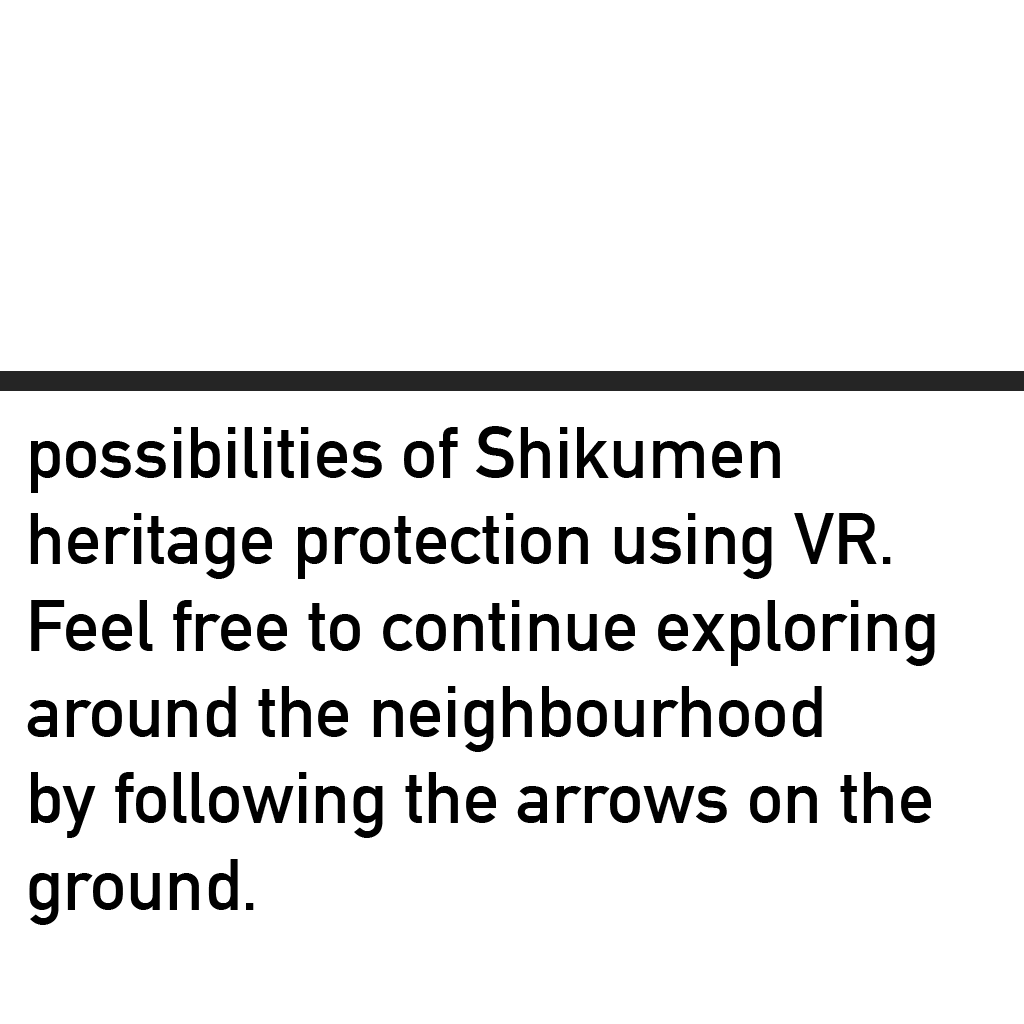
<style>
.page{position:relative;width:1024px;height:1024px;background:#ffffff}
.page>*{position:absolute;margin:0}
.t1{font:72px "DINAlternate-Bold";color:#000000}
</style>
<div class="page">
<p class="t1" style="left:27px;top:426px;width:908px;height:499px">possibilities of Shikumen<br>heritage protection using VR. <br>Feel free to continue exploring<br>around the neighbourhood<br>by following the arrows on the <br>ground.</p>
</div>
